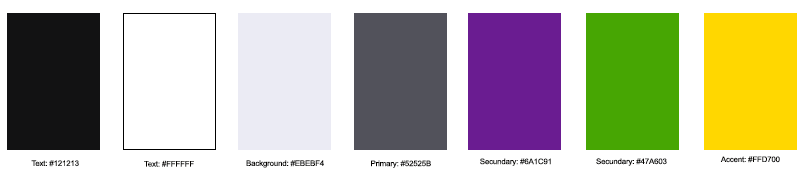
<style>
.page{position:relative;width:806px;height:183px;background:#ffffff}
.page>*{position:absolute;margin:0}
.t1{font:7.6px "ArialMT";letter-spacing:-0.02em;color:#060300;scale:1.03 1}
</style>
<div class="page">
<p class="t1" style="left:31px;top:160px;width:48px;height:7px">Text: #121213</p>
<p class="t1" style="left:144px;top:160px;width:50px;height:7px">Text: #FFFFFF</p>
<p class="t1" style="left:246px;top:160px;width:78px;height:8px">Background: #EBEBF4</p>
<p class="t1" style="left:371px;top:160px;width:60px;height:8px">Primary: #52525B</p>
<p class="t1" style="left:480px;top:158px;width:71px;height:8px">Secundary: #6A1C91</p>
<p class="t1" style="left:596px;top:158px;width:71px;height:8px">Secundary: #47A603</p>
<p class="t1" style="left:720px;top:156px;width:60px;height:7px">Accent: #FFD700</p>
</div>
